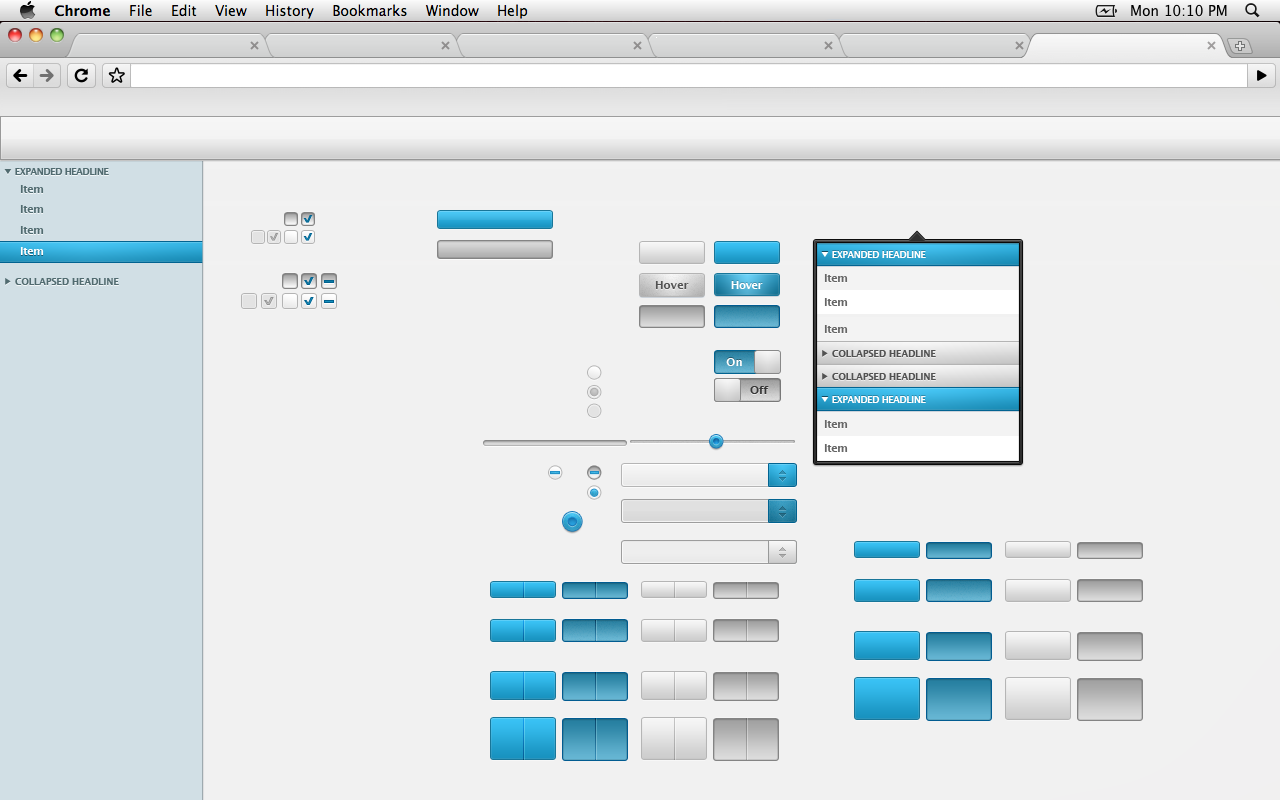
<style>
.page{position:relative;width:1280px;height:800px;background:#f1f1f1}
.page>*{position:absolute;margin:0}
.t1{font:9px "LucidaGrande-Bold";letter-spacing:-0.04em;color:#516b70}
.t2{font:11px "LucidaGrande-Bold";letter-spacing:-0.04em;color:#666666}
.t3{font:11px "LucidaGrande-Bold";letter-spacing:-0.04em;color:#ffffff}
.t4{font:9px "LucidaGrande-Bold";letter-spacing:-0.04em;color:#fffefe}
.t5{font:9px "LucidaGrande-Bold";color:#516b70}
.t6{font:11px "LucidaGrande-Bold";color:#525252}
.t7{font:9px "LucidaGrande-Bold";color:#525252}
.t8{font:11px "LucidaGrande-Bold";color:#ffffff}
.t9{font:11px "LucidaGrande-Bold";color:#363636}
</style>
<div class="page">
<p class="t1" style="left:15px;top:168px;width:94px;height:7px">EXPANDED HEADLINE</p>
<p class="t2" style="left:20px;top:185px;width:24px;height:8px">Item</p>
<p class="t2" style="left:20px;top:205px;width:24px;height:8px">Item</p>
<p class="t2" style="left:20px;top:226px;width:24px;height:8px">Item</p>
<p class="t3" style="left:20px;top:247px;width:24px;height:8px">Item</p>
<p class="t4" style="left:832px;top:251px;width:94px;height:7px">EXPANDED HEADLINE</p>
<p class="t5" style="left:15px;top:278px;width:104px;height:7px">COLLAPSED HEADLINE</p>
<p class="t6" style="left:655px;top:281px;width:34px;height:8px">Hover</p>
<p class="t3" style="left:731px;top:281px;width:32px;height:8px">Hover</p>
<p class="t2" style="left:824px;top:274px;width:24px;height:8px">Item</p>
<p class="t2" style="left:824px;top:298px;width:24px;height:8px">Item</p>
<p class="t2" style="left:824px;top:325px;width:24px;height:8px">Item</p>
<p class="t7" style="left:832px;top:350px;width:104px;height:7px">COLLAPSED HEADLINE</p>
<p class="t8" style="left:726px;top:358px;width:16px;height:8px">On</p>
<p class="t7" style="left:832px;top:373px;width:104px;height:7px">COLLAPSED HEADLINE</p>
<p class="t9" style="left:750px;top:386px;width:19px;height:8px">Off</p>
<p class="t4" style="left:832px;top:396px;width:94px;height:7px">EXPANDED HEADLINE</p>
<p class="t2" style="left:824px;top:420px;width:24px;height:8px">Item</p>
<p class="t2" style="left:824px;top:444px;width:24px;height:8px">Item</p>
</div>
